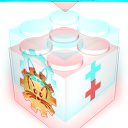
<style>
.page{position:relative;width:128px;height:128px}
.page>*{position:absolute;margin:0}
.t1{font:36.3px "Arial-Black";letter-spacing:-0.02em;color:#69f8f8}
</style>
<div class="page">
<p class="t1" style="left:85px;top:58px;width:16px;height:24px;rotate:-37deg">+</p>
</div>
